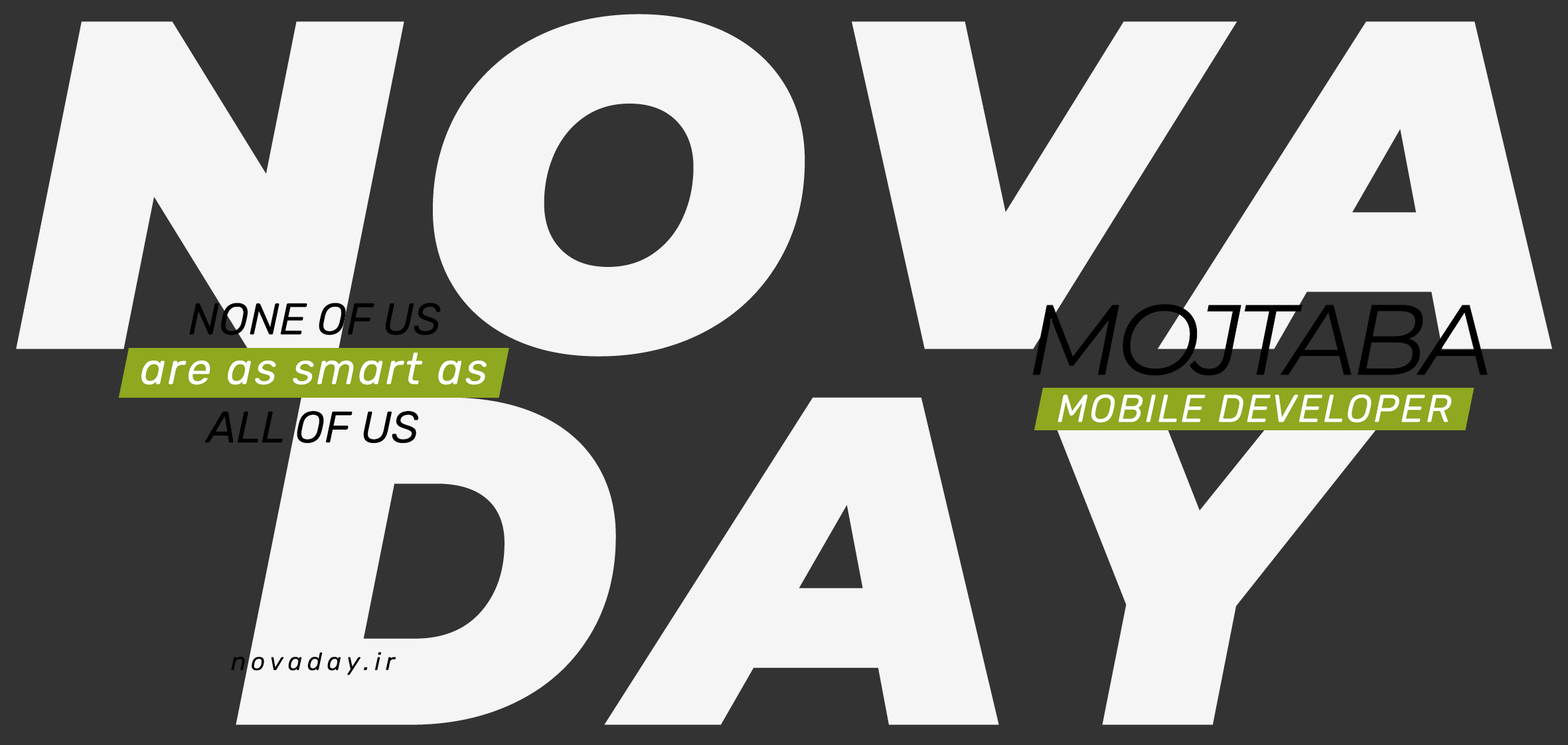
<style>
.page{position:relative;width:1568px;height:745px;background:#333333}
.page>*{position:absolute;margin:0}
.t1{font:467.1px/375.8px "Montserrat-BlackItalic";letter-spacing:0.05em;color:#f5f5f5}
.t2{font:44.3px "Rubik-Italic";color:#000000}
.t3{font:99.6px "Montserrat-Italic";letter-spacing:-0.05em;color:#000000}
.t4{font:44.3px "Rubik-Italic";letter-spacing:0.05em;color:#ffffff}
.t5{font:38.7px "Rubik-Italic";letter-spacing:0.05em;color:#ffffff}
.t6{font:24.9px "Rubik-Italic";letter-spacing:0.2em;color:#000000}
</style>
<div class="page">
<p class="t1" style="left:16px;top:14px;width:1536px;height:711px;text-align:center">NOVA<br>DAY</p>
<p class="t2" style="left:189px;top:303px;width:252px;height:32px">NONE OF US</p>
<p class="t3" style="left:1032px;top:304px;width:456px;height:72px">MOJTABA</p>
<p class="t4" style="left:141px;top:353px;width:346px;height:32px">are as smart as</p>
<p class="t5" style="left:1058px;top:394px;width:394px;height:29px">MOBILE DEVELOPER</p>
<p class="t2" style="left:205px;top:411px;width:214px;height:32px">ALL OF US</p>
<p class="t6" style="left:231px;top:652px;width:165px;height:23px">novaday.ir</p>
</div>
